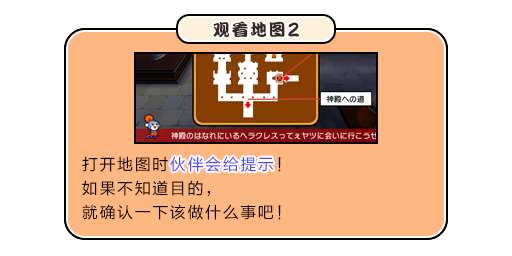
<style>
.page{position:relative;width:512px;height:256px;background:#ffffff}
.page>*{position:absolute;margin:0}
.t1{font:17px "DFPKanTingLiuW9";letter-spacing:0.1em;color:#3b2626}
.t2{font:20.4px "DFPKanTingLiuW9";letter-spacing:0.1em;color:#3b2626;scale:0.83 1}
.t3{font:16px/24px "FZLTHJW--GB1-0";letter-spacing:0.1em;color:#000000}
.t4{font:16px/24px "FZLTHJW--GB1-0";letter-spacing:0.1em;color:#5444ed}
.t5{font:16px "FZLTHJW--GB1-0";letter-spacing:0.1em;color:#5444ed}
</style>
<div class="page">
<p class="t1" style="left:213px;top:21px;width:86px;height:17px">观看地图<span class="t2">2</span></p>
<p class="t3" style="left:82px;top:156px;width:199px;height:64px">打开地图时<span class="t4">伙伴会给提示</span>！<br>如果不知道目的，<br>就确认一下该做什么事吧！</p>
<p class="t5" style="left:170px;top:156px;width:104px;height:16px">伙伴会给提示</p>
</div>
